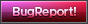
<style>
.page{position:relative;width:88px;height:24px}
.page>*{position:absolute;margin:0}
.t1{font:12px "Metropolis-SemiBold"}
</style>
<div class="page">
<p class="t1" style="left:13px;top:7px;width:63px;height:11px">BugReport!</p>
</div>
